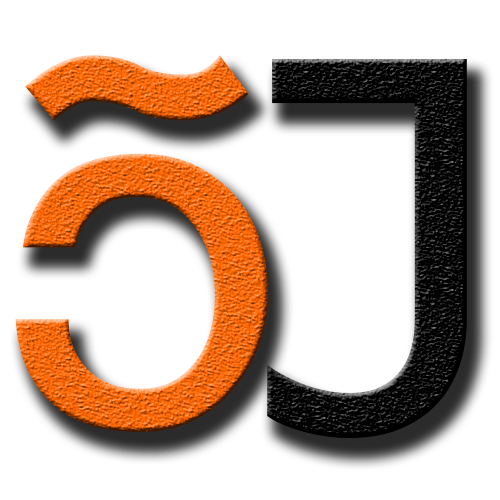
<style>
.page{position:relative;width:500px;height:500px;background:#ffffff}
.page>*{position:absolute;margin:0}
.t1{font:614px "BookshelfSymbolSeven"}
.t2{font:588px "Consolas";color:#000000}
</style>
<div class="page">
<p class="t1" style="left:15px;top:55px;width:253px;height:377px">S</p>
<p class="t2" style="left:267px;top:59px;width:200px;height:379px">J</p>
</div>
